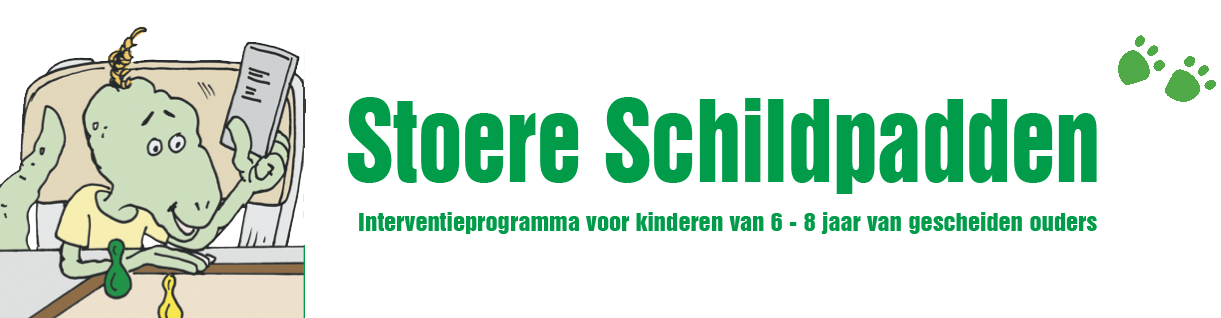
<style>
.page{position:relative;width:1221px;height:318px;background:#ffffff}
.page>*{position:absolute;margin:0}
.t1{font:104.1px "Swiss921BT-RegularA";color:#009c4a;scale:0.87 1}
.t2{font:23px "Swiss921BT-RegularA";color:#009c4a;scale:1.08 1}
</style>
<div class="page">
<p class="t1" style="left:347px;top:97px;width:750px;height:97px">Stoere Schildpadden</p>
<p class="t2" style="left:359px;top:212px;width:738px;height:22px">Interventieprogramma voor kinderen van 6 - 8 jaar van gescheiden ouders</p>
</div>
